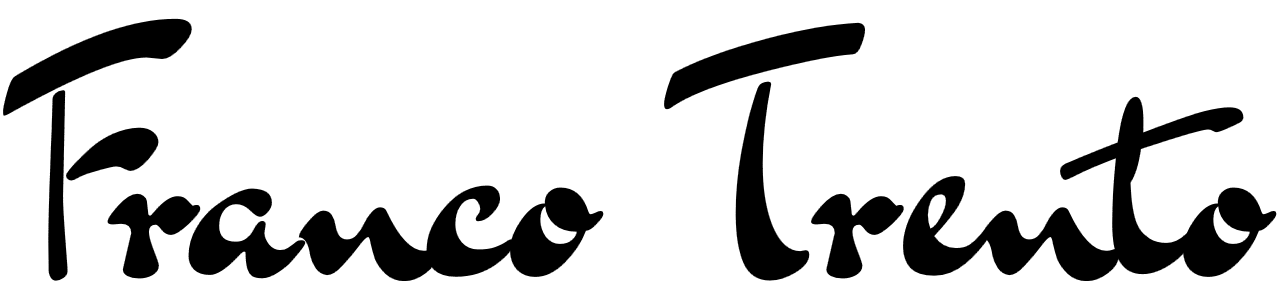
<style>
.page{position:relative;width:1280px;height:300px;background:#ffffff}
.page>*{position:absolute;margin:0}
.t1{font:300px "DrSugiyama-Regular";color:#000000}
</style>
<div class="page">
<p class="t1" style="left:3px;top:18px;width:1274px;height:263px">Franco Trento</p>
<p class="t1" style="left:3px;top:18px;width:1274px;height:263px">Franco Trento</p>
</div>
